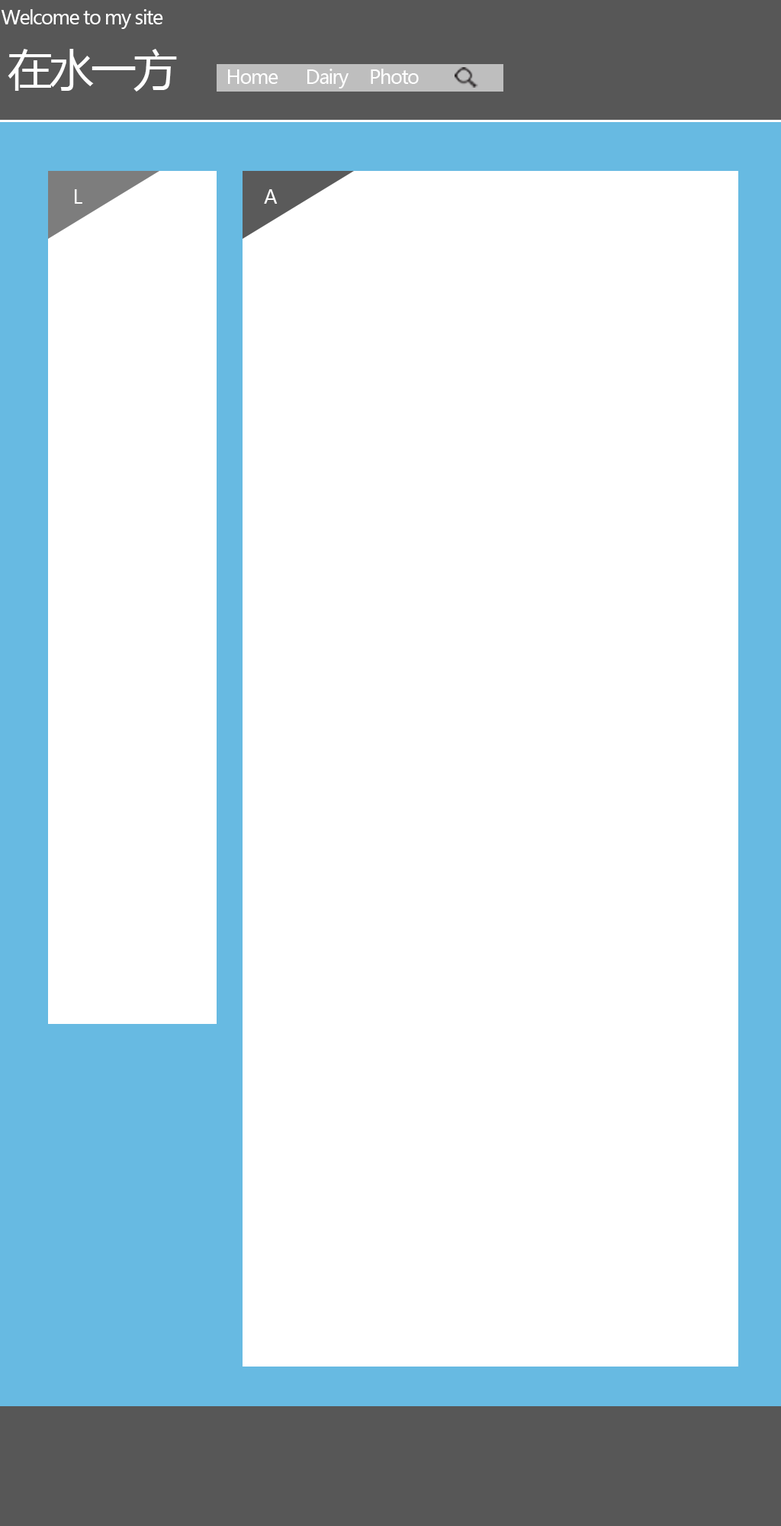
<style>
.page{position:relative;width:781px;height:1526px;background:#ffffff}
.page>*{position:absolute;margin:0}
.t1{font:19.1px "MicrosoftYaHei";letter-spacing:-0.06em;color:#ffffff}
.t2{font:44.5px "MicrosoftYaHei";letter-spacing:-0.06em;color:#ffffff}
</style>
<div class="page">
<p class="t1" style="left:1px;top:9px;width:162px;height:20px">Welcome to my site</p>
<p class="t2" style="left:8px;top:49px;width:169px;height:43px">在水一方</p>
<p class="t1" style="left:228px;top:69px;width:51px;height:15px">Home</p>
<p class="t1" style="left:308px;top:69px;width:41px;height:20px">Dairy</p>
<p class="t1" style="left:371px;top:69px;width:48px;height:15px">Photo</p>
<p class="t1" style="left:75px;top:189px;width:7px;height:15px">L</p>
<p class="t1" style="left:264px;top:189px;width:14px;height:15px">A</p>
</div>
